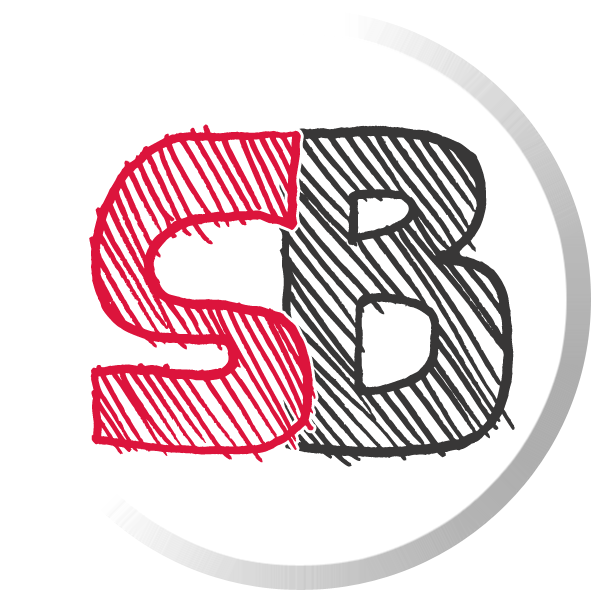
<style>
.page{position:relative;width:600px;height:600px;background:#ffffff}
.page>*{position:absolute;margin:0}
.t1{font:184.6px "BestPrices";color:#dc143c}
.t2{font:199.3px "BestPrices";color:#383737}
</style>
<div class="page">
<p class="t1" style="left:89px;top:124px;width:227px;height:339px">S</p>
<p class="t2" style="left:276px;top:125px;width:239px;height:342px">B</p>
</div>
